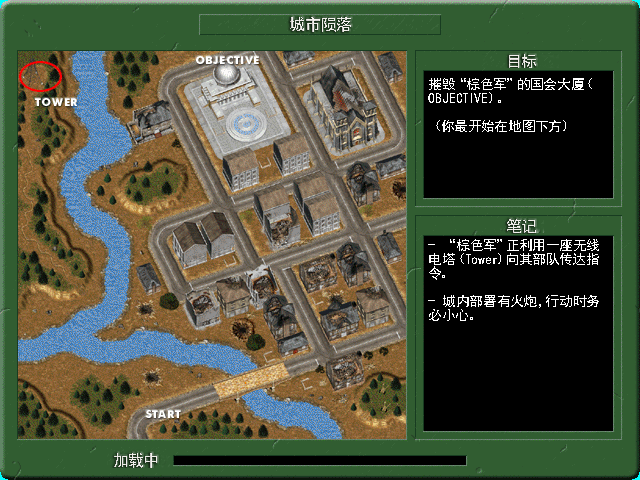
<style>
.page{position:relative;width:640px;height:480px;background:#315d31}
.page>*{position:absolute;margin:0}
.t1{font:16px "SimHei";color:#f3f0ed}
.t2{font:14px/14px "SimHei";color:#ffffff}
</style>
<div class="page">
<p class="t1" style="left:290px;top:17px;width:61px;height:15px">城市陨落</p>
<p class="t1" style="left:509px;top:54px;width:27px;height:14px">目标</p>
<p class="t2" style="left:428px;top:78px;width:164px;height:54px">摧毁“棕色军”的国会大厦（OBJECTIVE）。<br><br>（你最开始在地图下方）</p>
<p class="t1" style="left:507px;top:219px;width:29px;height:14px">笔记</p>
<p class="t2" style="left:428px;top:239px;width:171px;height:82px">- “棕色军”正利用一座无线电塔（Tower）向其部队传达指令。<br><br>- 城内部署有火炮，行动时务必小心。</p>
<p class="t1" style="left:114px;top:453px;width:43px;height:15px">加载中</p>
</div>
